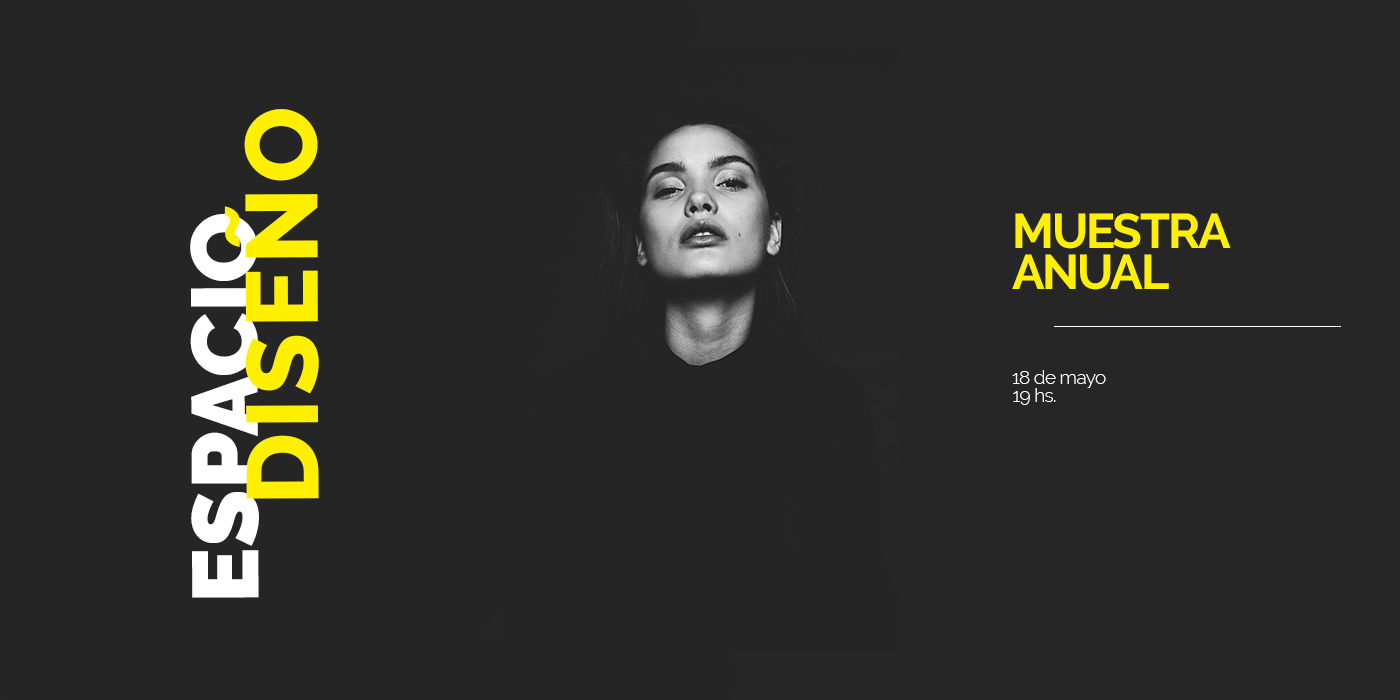
<style>
.page{position:relative;width:1400px;height:700px;background:#252525}
.page>*{position:absolute;margin:0}
.t1{font:101px "Raleway-ExtraBold";letter-spacing:0.04em;color:#fff000}
.t2{font:93.2px "Raleway-Black";color:#ffffff}
.t3{font:48.4px/41.7px "Raleway-Bold";letter-spacing:-0.04em;color:#fff000}
.t4{font:19.3px/17.7px "Raleway-Light";letter-spacing:-0.04em;color:#ffffff}
</style>
<div class="page">
<p class="t1" style="left:224px;top:109px;width:95px;height:390px;rotate:-90deg">DISEÑO</p>
<p class="t2" style="left:190px;top:213px;width:69px;height:385px;rotate:-90deg">ESPACIO</p>
<p class="t3" style="left:1012px;top:213px;width:219px;height:77px">MUESTRA <br>ANUAL</p>
<p class="t4" style="left:1012px;top:370px;width:94px;height:35px">18 de mayo<br>19 hs.</p>
</div>
